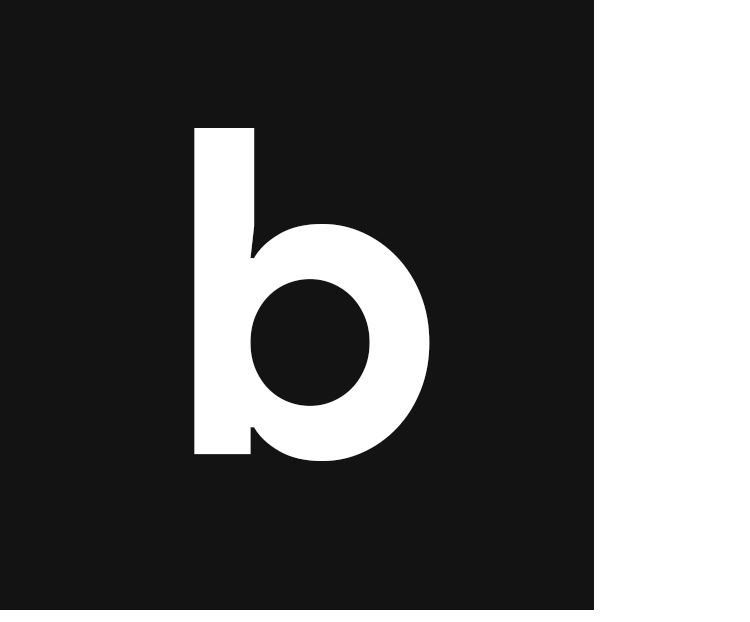
<style>
.page{position:relative;width:750px;height:622px;background:#141313}
.page>*{position:absolute;margin:0}
.t1{font:455px "ProductSans-Bold";color:#ffffff}
</style>
<div class="page">
<p class="t1" style="left:194px;top:128px;width:236px;height:333px">b</p>
</div>
